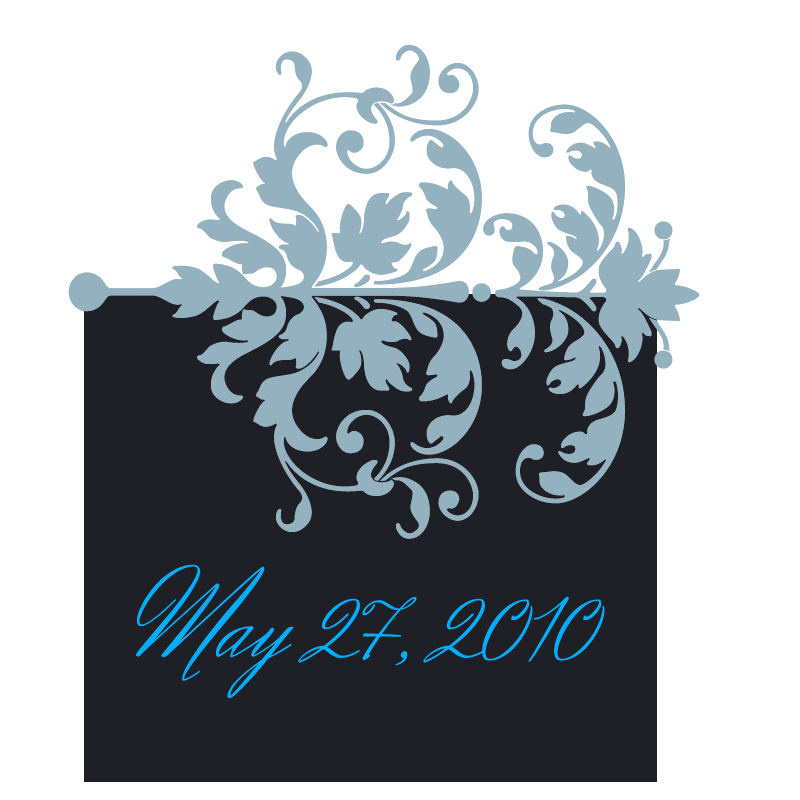
<style>
.page{position:relative;width:800px;height:800px;background:#ffffff}
.page>*{position:absolute;margin:0}
.t1{font:112px "HerrVonMuellerhoff";color:#00aeff}
</style>
<div class="page">
<p class="t1" style="left:136px;top:564px;width:469px;height:135px">May 27, 2010</p>
</div>
